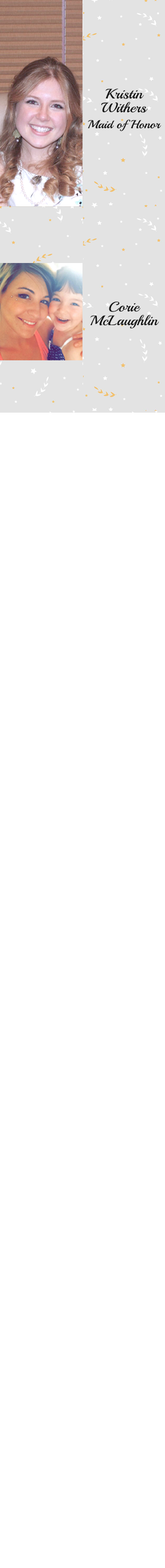
<style>
.page{position:relative;width:165px;height:1568px;background:#ffffff}
.page>*{position:absolute;margin:0}
.t1{font:13.8px/13.8px "Playball-Regular";color:#111111;scale:1.1 1}
.t2{font:11.5px/16px "Playball-Regular";color:#111111;scale:1.1 1}
</style>
<div class="page">
<p class="t1" style="left:88px;top:89px;width:73px;height:42px;text-align:center">Kristin<br>Withers<br><span class="t2">Maid of Honor</span></p>
<p class="t1" style="left:90px;top:301px;width:69px;height:27px;text-align:center">Corie <br>McLaughlin</p>
</div>
